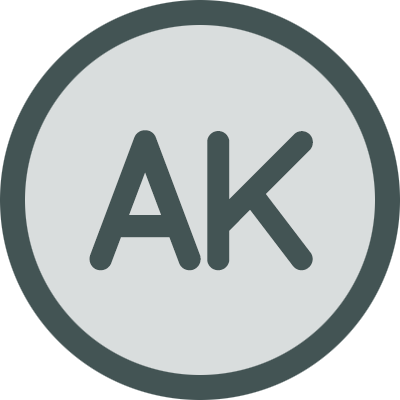
<style>
.page{position:relative;width:400px;height:400px;background:#d9dddd}
.page>*{position:absolute;margin:0}
.t1{font:200px "Quicksand-Bold";letter-spacing:-0.1em;color:#435454}
</style>
<div class="page">
<p class="t1" style="left:89px;top:130px;width:224px;height:141px">AK</p>
</div>
